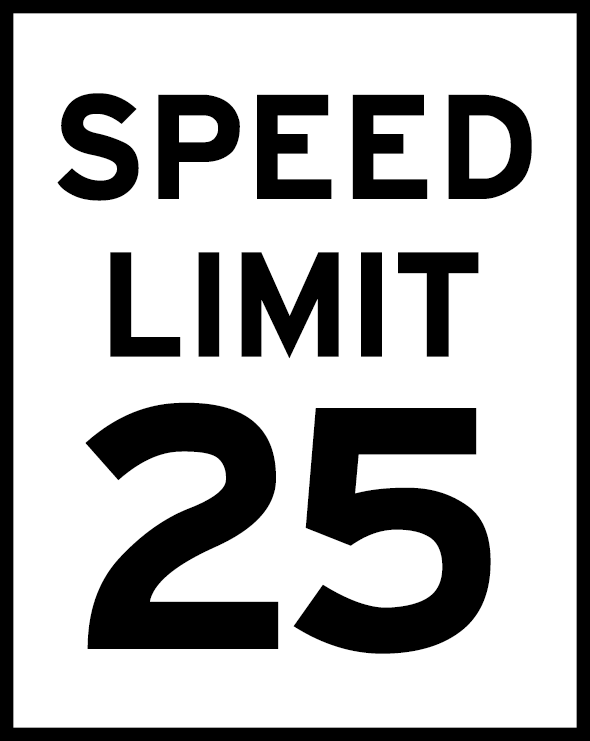
<style>
.page{position:relative;width:590px;height:741px;background:#ffffff}
.page>*{position:absolute;margin:0}
.t1{font:157.7px/157.7px "HittheRoad";color:#000000}
.t2{font:365px "HittheRoad";color:#000000}
</style>
<div class="page">
<p class="t1" style="left:57px;top:93px;width:475px;height:266px;text-align:center">SPEED<br>LIMIT</p>
<p class="t2" style="left:85px;top:402px;width:406px;height:252px">25</p>
</div>
